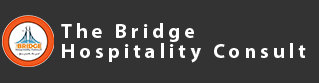
<style>
.page{position:relative;width:319px;height:83px;background:#333333}
.page>*{position:absolute;margin:0}
.t1{font:20.2px/20px "MyriadPro-Bold";letter-spacing:0.2em;color:#ffffff}
</style>
<div class="page">
<p class="t1" style="left:61px;top:23px;width:245px;height:40px">The Bridge<br>Hospitality Consult</p>
</div>
